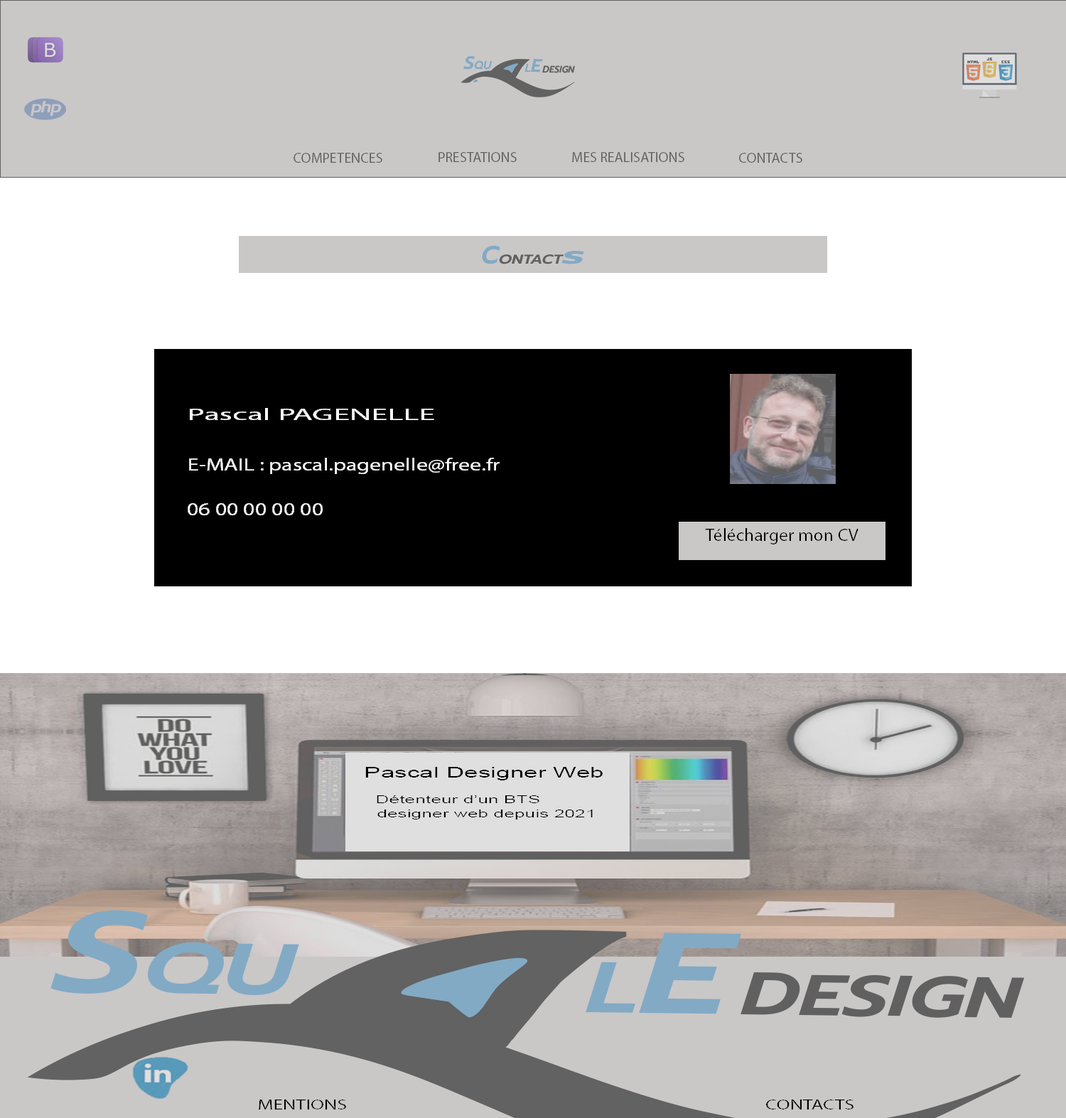
<style>
.page{position:relative;width:1066px;height:1118px;background:#ffffff}
.page>*{position:absolute;margin:0}
.t1{font:14.2px "MyriadPro-Regular";color:#606060}
.t2{font:16.7px "MyriadPro-Regular";color:#ffffff;scale:1.97 1}
.t3{font:17.8px "MyriadPro-Regular";color:#ffffff;scale:1.29 1}
.t4{font:17.6px "MyriadPro-Regular";color:#000000;scale:1.04 1}
.t5{font:14.2px "ArialMT";color:#000000;scale:1.76 1}
.t6{font:10.7px "ArialMT";color:#000000;scale:1.76 1}
.t7{font:14.2px "MyriadPro-Regular";color:#000000;scale:1.39 1}
</style>
<div class="page">
<p class="t1" style="left:294px;top:153px;width:88px;height:10px">COMPETENCES</p>
<p class="t1" style="left:439px;top:152px;width:78px;height:10px">PRESTATIONS</p>
<p class="t1" style="left:572px;top:152px;width:113px;height:10px">MES REALISATIONS</p>
<p class="t1" style="left:739px;top:153px;width:64px;height:10px">CONTACTS</p>
<p class="t2" style="left:190px;top:408px;width:244px;height:12px">Pascal PAGENELLE</p>
<p class="t3" style="left:189px;top:458px;width:311px;height:16px">E-MAIL : pascal.pagenelle@free.fr</p>
<p class="t3" style="left:188px;top:503px;width:135px;height:12px">06 00 00 00 00</p>
<p class="t4" style="left:705px;top:528px;width:154px;height:17px">Télécharger mon CV</p>
<p class="t5" style="left:365px;top:767px;width:238px;height:14px">Pascal Designer Web</p>
<p class="t6" style="left:377px;top:795px;width:163px;height:8px">Détenteur d’un BTS</p>
<p class="t6" style="left:377px;top:810px;width:216px;height:10px">designer web depuis 2021</p>
<p class="t7" style="left:259px;top:1100px;width:87px;height:10px">MENTIONS</p>
<p class="t7" style="left:766px;top:1100px;width:88px;height:10px">CONTACTS</p>
</div>
